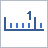
<style>
.page{position:relative;width:48px;height:48px;background:#ffffff}
.page>*{position:absolute;margin:0}
.t1{font:12px "ArialMT";letter-spacing:0.1em;color:#395c93;font-weight:bold}
</style>
<div class="page">
<p class="t1" style="left:27px;top:11px;width:4px;height:9px">1</p>
</div>
